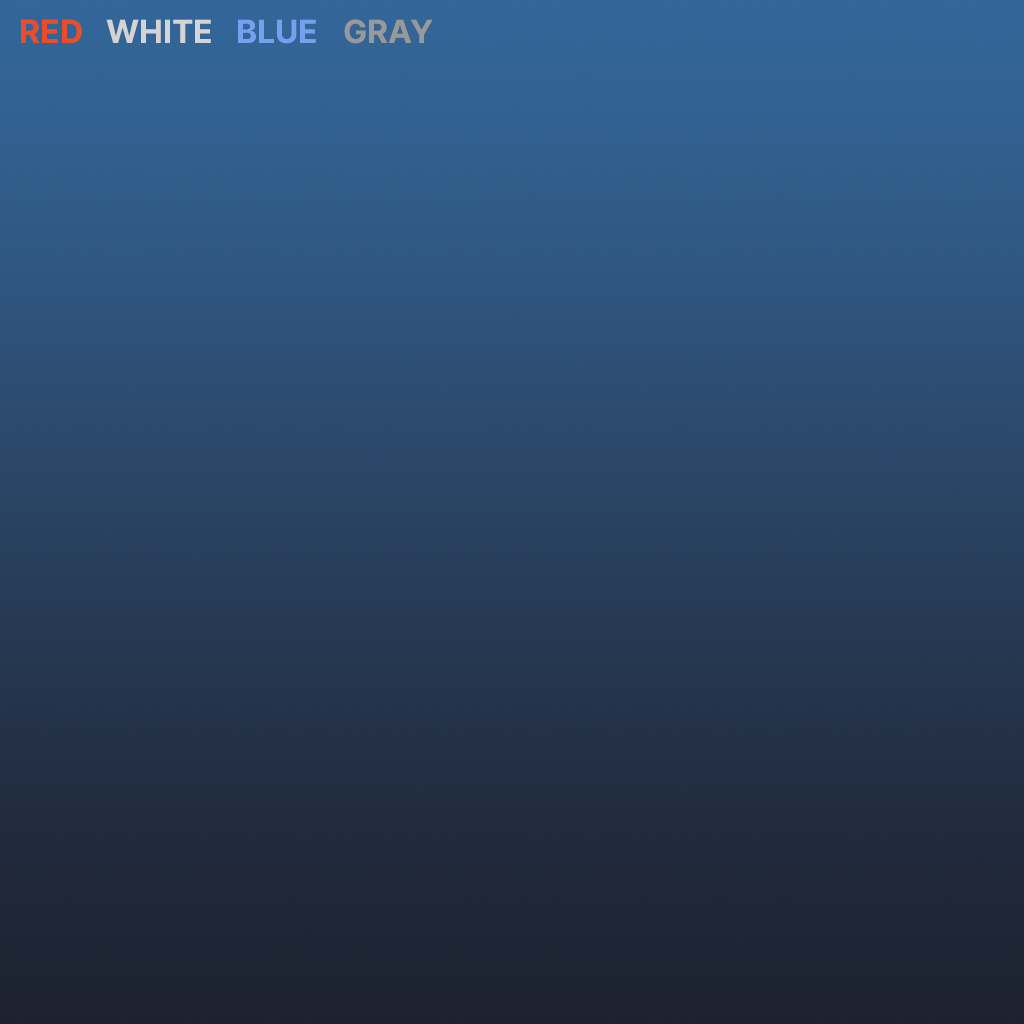
<style>
.page{position:relative;width:1024px;height:1024px}
.page>*{position:absolute;margin:0}
.t1{font:32px "Inter-Bold";color:#eb4d28}
.t2{font:32px "Inter-Bold";color:#d4d4d4}
.t3{font:32px "Inter-Bold";color:#769ff0}
.t4{font:32px "Inter-Bold";color:#999999}
</style>
<div class="page">
<p class="t1" style="left:21px;top:19px;width:61px;height:24px">RED</p>
<p class="t2" style="left:106px;top:19px;width:105px;height:24px">WHITE</p>
<p class="t3" style="left:238px;top:19px;width:78px;height:25px">BLUE</p>
<p class="t4" style="left:344px;top:19px;width:89px;height:25px">GRAY</p>
</div>
